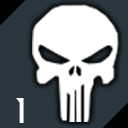
<style>
.page{position:relative;width:128px;height:128px;background:#29363e}
.page>*{position:absolute;margin:0}
.t1{font:35.8px "SpaceEngineers";color:#fefefe}
</style>
<div class="page">
<p class="t1" style="left:16px;top:98px;width:8px;height:25px">1</p>
</div>
